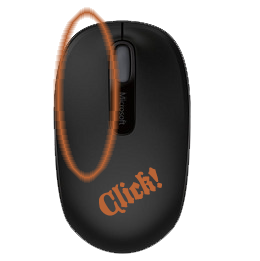
<style>
.page{position:relative;width:260px;height:261px;background:#ffffff}
.page>*{position:absolute;margin:0}
.t1{font:32.2px "BlackCastleMF";color:#b86436}
</style>
<div class="page">
<p class="t1" style="left:99px;top:167px;width:63px;height:49px;rotate:-29deg">Click!</p>
</div>
